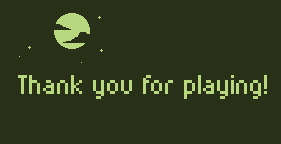
<style>
.page{position:relative;width:281px;height:144px;background:#283018}
.page>*{position:absolute;margin:0}
.t1{font:28px "Munro";color:#b8d880}
</style>
<div class="page">
<p class="t1" style="left:18px;top:75px;width:249px;height:24px">Thank you for playing!</p>
</div>
